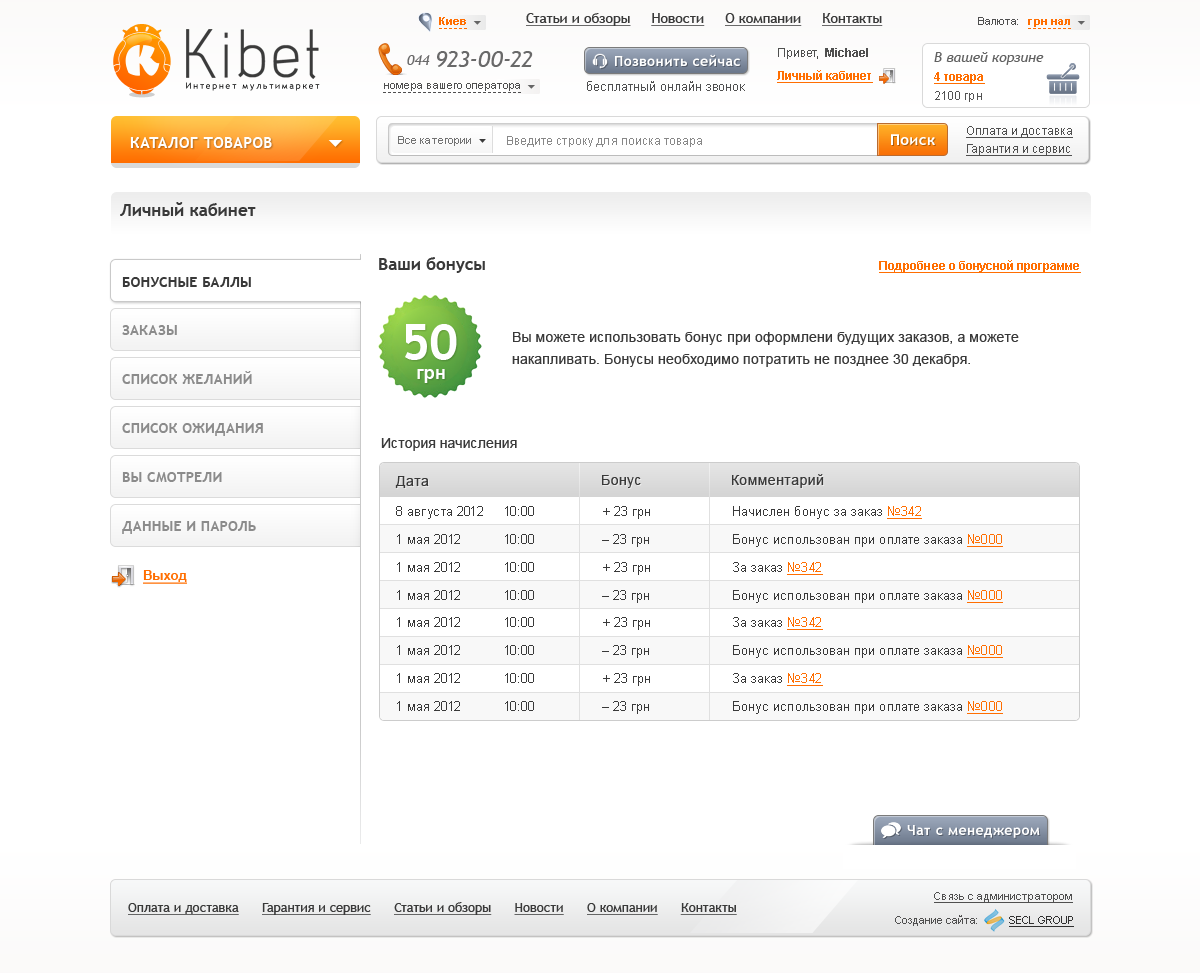
<style>
.page{position:relative;width:1200px;height:973px;background:#ffffff}
.page>*{position:absolute;margin:0}
.t1{font:11px "Arial-BoldMT";color:#ff6e01}
.t2{font:14px "TrebuchetMS";color:#393939;text-decoration:underline}
.t3{font:11px "ArialMT";color:#4f4f4f}
.t4{font:87.5px "Acid";color:#3b3b3b}
.t5{font:23px "TrebuchetMS-Italic";color:#696969}
.t6{font:14px "TrebuchetMS-Bold";letter-spacing:0.03em;color:#ffffff}
.t7{font:12px "ArialMT";color:#4f4f4f}
.t8{font:12px "Arial-BoldMT";color:#4f4f4f}
.t9{font:14px "TrebuchetMS-Italic";color:#616161}
.t10{font:14px "TrebuchetMS-Italic";color:#696969}
.t11{font:12px "Arial-BoldMT";color:#ff6e01;text-decoration:underline}
.t12{font:8.8px "TrebuchetMS";letter-spacing:0.2em;color:#060606}
.t13{font:13px "ArialMT";color:#4f4f4f}
.t14{font:12px "ArialMT";color:#535353}
.t15{font:12px "ArialMT";color:#4f4f4f;text-decoration:underline}
.t16{font:15px "TrebuchetMS-Bold";letter-spacing:0.03em;color:#ffffff}
.t17{font:11px "ArialMT";color:#727272}
.t18{font:12px "ArialMT";color:#888888}
.t19{font:17px "TrebuchetMS-Bold";color:#393939}
.t20{font:14px "TrebuchetMS-Bold";letter-spacing:0.02em;color:#393939}
.t21{font:14px "TrebuchetMS-Bold";letter-spacing:0.02em;color:#8b8b8b}
.t22{font:50px "TrebuchetMS-Bold";color:#ffffff}
.t23{font:14px/22px "ArialMT";letter-spacing:0.01em;color:#393939}
.t24{font:18px "Arial-BoldMT";color:#ffffff}
.t25{font:14px "ArialMT";color:#393939}
.t26{font:14px "ArialMT";letter-spacing:0.03em;color:#393939}
.t27{font:13px "ArialMT";color:#393939}
.t28{font:13px "ArialMT";color:#ff6e01;text-decoration:underline}
.t29{font:13px "Arial-BoldMT";color:#ff6e01;text-decoration:underline}
.t30{font:11px "ArialMT";color:#4f4f4f;text-decoration:underline}
.t31{font:13px "TrebuchetMS";color:#393939;text-decoration:underline}
.t32{font:11px "ArialMT";color:#303030;text-decoration:underline}
</style>
<div class="page">
<p class="t1" style="left:439px;top:17px;width:27px;height:8px">Киев</p>
<p class="t2" style="left:526px;top:13px;width:357px;height:13px">Статьи и обзоры     Новости     О компании     Контакты</p>
<p class="t3" style="left:978px;top:17px;width:40px;height:8px">Валюта:</p>
<p class="t4" style="left:186px;top:29px;width:133px;height:50px">Kibet</p>
<p class="t1" style="left:1028px;top:19px;width:42px;height:8px">грн нал</p>
<p class="t5" style="left:437px;top:51px;width:96px;height:16px">923-00-22</p>
<p class="t6" style="left:615px;top:54px;width:125px;height:12px">Позвонить сейчас</p>
<p class="t7" style="left:778px;top:48px;width:90px;height:11px">Привет,  <span class="t8">Michael</span></p>
<p class="t9" style="left:934px;top:52px;width:110px;height:13px">В вашей корзине</p>
<p class="t10" style="left:407px;top:55px;width:23px;height:10px">044</p>
<p class="t11" style="left:777px;top:70px;width:96px;height:13px">Личный кабинет</p>
<p class="t11" style="left:934px;top:72px;width:51px;height:12px">4 товара</p>
<p class="t12" style="left:186px;top:82px;width:134px;height:9px">Интернет мультимаркет</p>
<p class="t3" style="left:384px;top:83px;width:136px;height:8px">номера вашего оператора</p>
<p class="t13" style="left:587px;top:81px;width:158px;height:10px">бесплатный онлайн звонок</p>
<p class="t14" style="left:935px;top:91px;width:47px;height:11px">2100 грн</p>
<p class="t15" style="left:966px;top:126px;width:107px;height:12px">Оплата и доставка</p>
<p class="t16" style="left:130px;top:137px;width:142px;height:11px">КАТАЛОГ ТОВАРОВ</p>
<p class="t17" style="left:398px;top:136px;width:73px;height:10px">Все категории</p>
<p class="t18" style="left:507px;top:136px;width:195px;height:11px">Введите строку для поиска товара</p>
<p class="t16" style="left:891px;top:134px;width:44px;height:11px">Поиск</p>
<p class="t15" style="left:966px;top:144px;width:106px;height:12px">Гарантия и сервис</p>
<p class="t19" style="left:120px;top:202px;width:136px;height:14px">Личный кабинет</p>
<p class="t19" style="left:379px;top:257px;width:106px;height:16px">Ваши бонусы</p>
<p class="t11" style="left:879px;top:260px;width:202px;height:13px">Подробнее о бонусной программе</p>
<p class="t20" style="left:122px;top:277px;width:129px;height:10px">БОНУСНЫЕ БАЛЛЫ</p>
<p class="t21" style="left:122px;top:325px;width:55px;height:10px">ЗАКАЗЫ</p>
<p class="t22" style="left:405px;top:324px;width:52px;height:36px">50</p>
<p class="t23" style="left:512px;top:332px;width:507px;height:35px">Вы можете использовать бонус при оформлени будущих заказов, а можете накапливать. Бонусы необходимо потратить не позднее 30 декабря.</p>
<p class="t21" style="left:122px;top:371px;width:130px;height:13px">СПИСОК ЖЕЛАНИЙ</p>
<p class="t24" style="left:417px;top:369px;width:28px;height:14px">грн</p>
<p class="t21" style="left:122px;top:423px;width:141px;height:13px">СПИСОК ОЖИДАНИЯ</p>
<p class="t25" style="left:381px;top:438px;width:136px;height:13px">История начисления</p>
<p class="t21" style="left:122px;top:472px;width:100px;height:10px">ВЫ СМОТРЕЛИ</p>
<p class="t26" style="left:395px;top:476px;width:34px;height:12px">Дата</p>
<p class="t26" style="left:602px;top:475px;width:39px;height:13px">Бонус</p>
<p class="t26" style="left:732px;top:474px;width:92px;height:14px">Комментарий</p>
<p class="t27" style="left:396px;top:506px;width:138px;height:13px">8 августа 2012 10:00</p>
<p class="t27" style="left:603px;top:506px;width:47px;height:13px">+ 23 грн</p>
<p class="t27" style="left:733px;top:506px;width:189px;height:13px">Начислен бонус за заказ <span class="t28">№342</span></p>
<p class="t21" style="left:122px;top:521px;width:134px;height:13px">ДАННЫЕ И ПАРОЛЬ</p>
<p class="t27" style="left:397px;top:534px;width:137px;height:10px">1 мая 2012  10:00</p>
<p class="t27" style="left:602px;top:534px;width:47px;height:13px">– 23 грн</p>
<p class="t27" style="left:733px;top:534px;width:270px;height:13px">Бонус использован при оплате заказа <span class="t28">№000</span></p>
<p class="t27" style="left:397px;top:562px;width:137px;height:10px">1 мая 2012  10:00</p>
<p class="t27" style="left:603px;top:562px;width:47px;height:13px">+ 23 грн</p>
<p class="t27" style="left:733px;top:562px;width:90px;height:13px">За заказ <span class="t28">№342</span></p>
<p class="t29" style="left:143px;top:570px;width:44px;height:14px">Выход</p>
<p class="t27" style="left:397px;top:590px;width:137px;height:10px">1 мая 2012  10:00</p>
<p class="t27" style="left:602px;top:590px;width:47px;height:13px">– 23 грн</p>
<p class="t27" style="left:733px;top:590px;width:270px;height:13px">Бонус использован при оплате заказа <span class="t28">№000</span></p>
<p class="t27" style="left:397px;top:617px;width:137px;height:10px">1 мая 2012  10:00</p>
<p class="t27" style="left:603px;top:617px;width:47px;height:13px">+ 23 грн</p>
<p class="t27" style="left:733px;top:617px;width:90px;height:13px">За заказ <span class="t28">№342</span></p>
<p class="t27" style="left:397px;top:645px;width:137px;height:10px">1 мая 2012  10:00</p>
<p class="t27" style="left:602px;top:645px;width:47px;height:13px">– 23 грн</p>
<p class="t27" style="left:733px;top:645px;width:270px;height:13px">Бонус использован при оплате заказа <span class="t28">№000</span></p>
<p class="t27" style="left:397px;top:673px;width:137px;height:10px">1 мая 2012  10:00</p>
<p class="t27" style="left:603px;top:673px;width:47px;height:13px">+ 23 грн</p>
<p class="t27" style="left:733px;top:673px;width:90px;height:13px">За заказ <span class="t28">№342</span></p>
<p class="t27" style="left:397px;top:701px;width:137px;height:10px">1 мая 2012  10:00</p>
<p class="t27" style="left:602px;top:701px;width:47px;height:13px">– 23 грн</p>
<p class="t27" style="left:733px;top:701px;width:270px;height:13px">Бонус использован при оплате заказа <span class="t28">№000</span></p>
<p class="t6" style="left:907px;top:825px;width:133px;height:13px">Чат с менеджером</p>
<p class="t30" style="left:934px;top:892px;width:139px;height:11px">Связь с администратором</p>
<p class="t31" style="left:128px;top:902px;width:609px;height:13px">Оплата и доставка      Гарантия и сервис      Статьи и обзоры      Новости      О компании      Контакты</p>
<p class="t3" style="left:895px;top:915px;width:82px;height:11px">Создание сайта:</p>
<p class="t32" style="left:1009px;top:916px;width:65px;height:11px">SECL GROUP</p>
</div>
